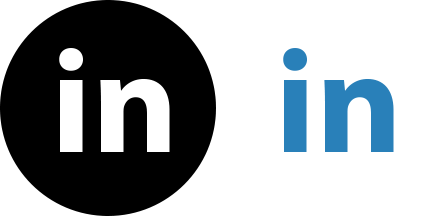
<style>
.page{position:relative;width:440px;height:216px;background:#ffffff}
.page>*{position:absolute;margin:0}
.t1{font:148px "MyriadPro-Bold";color:#2980b9}
</style>
<div class="page">
<p class="t1" style="left:283px;top:48px;width:111px;height:104px">in</p>
</div>
